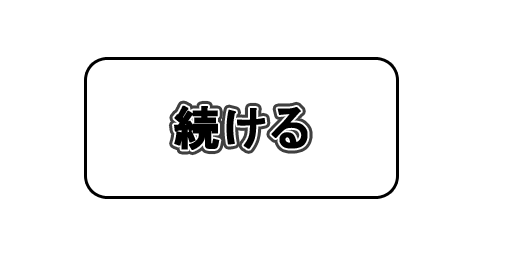
<style>
.page{position:relative;width:512px;height:256px;background:#ffffff}
.page>*{position:absolute;margin:0}
.t1{font:46px "HGPGothicE";letter-spacing:0.05em;color:#000000;font-weight:bold}
</style>
<div class="page">
<p class="t1" style="left:174px;top:105px;width:134px;height:45px">続ける</p>
</div>
